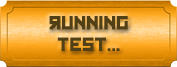
<style>
.page{position:relative;width:177px;height:67px}
.page>*{position:absolute;margin:0}
.t1{font:18px "Kremlin";color:#514016}
</style>
<div class="page">
<p class="t1" style="left:49px;top:16px;width:79px;height:35px;text-align:center">rUNNING<br>TEST...</p>
</div>
